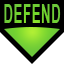
<style>
.page{position:relative;width:64px;height:64px;background:#000000}
.page>*{position:absolute;margin:0}
.t1{font:26.2px "ArialNarrow-Bold";letter-spacing:0.05em;color:#70ce33;scale:0.6 1}
</style>
<div class="page">
<p class="t1" style="left:4px;top:4px;width:57px;height:19px">DEFEND</p>
</div>
